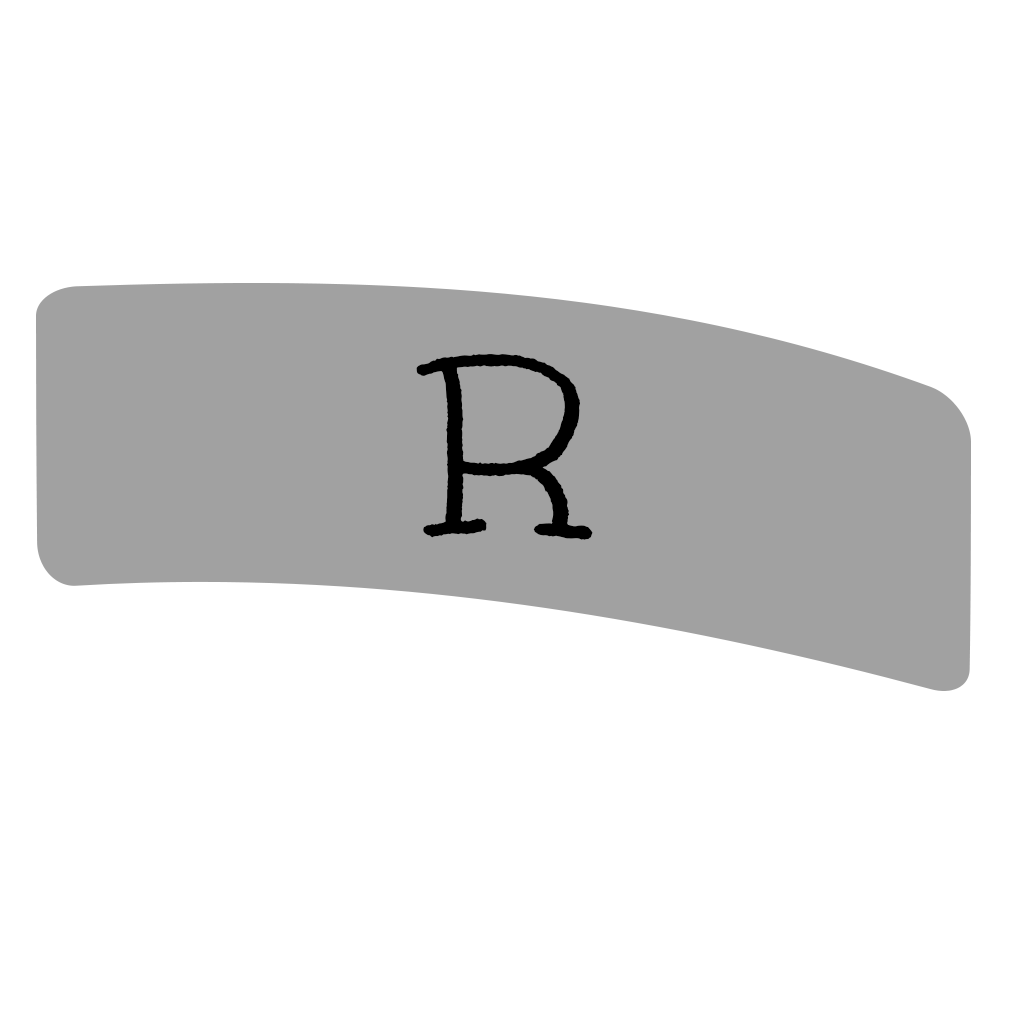
<style>
.page{position:relative;width:1024px;height:1024px;background:#ffffff}
.page>*{position:absolute;margin:0}
.t1{font:250px "Unkempt";color:#000000}
</style>
<div class="page">
<p class="t1" style="left:416px;top:354px;width:177px;height:186px">R</p>
</div>
